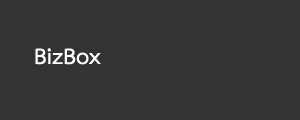
<style>
.page{position:relative;width:300px;height:120px;background:#333333}
.page>*{position:absolute;margin:0}
.t1{font:32px "THSarabunPSK-Bold";color:#ffffff}
</style>
<div class="page">
<p class="t1" style="left:35px;top:48px;width:66px;height:17px">BizBox</p>
</div>
